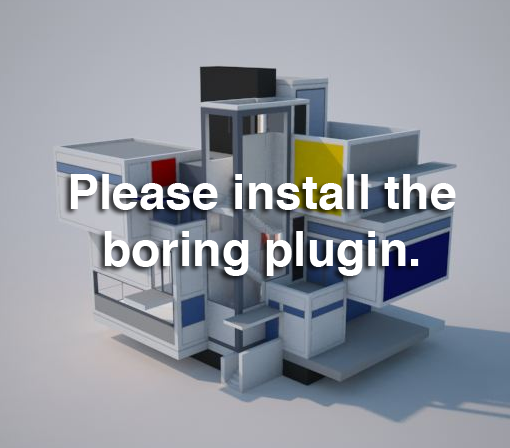
<style>
.page{position:relative;width:510px;height:448px}
.page>*{position:absolute;margin:0}
.t1{font:48px "Helvetica-Bold";color:#ffffff}
</style>
<div class="page">
<p class="t1" style="left:70px;top:174px;width:386px;height:102px;text-align:center">Please install the boring plugin.</p>
</div>
